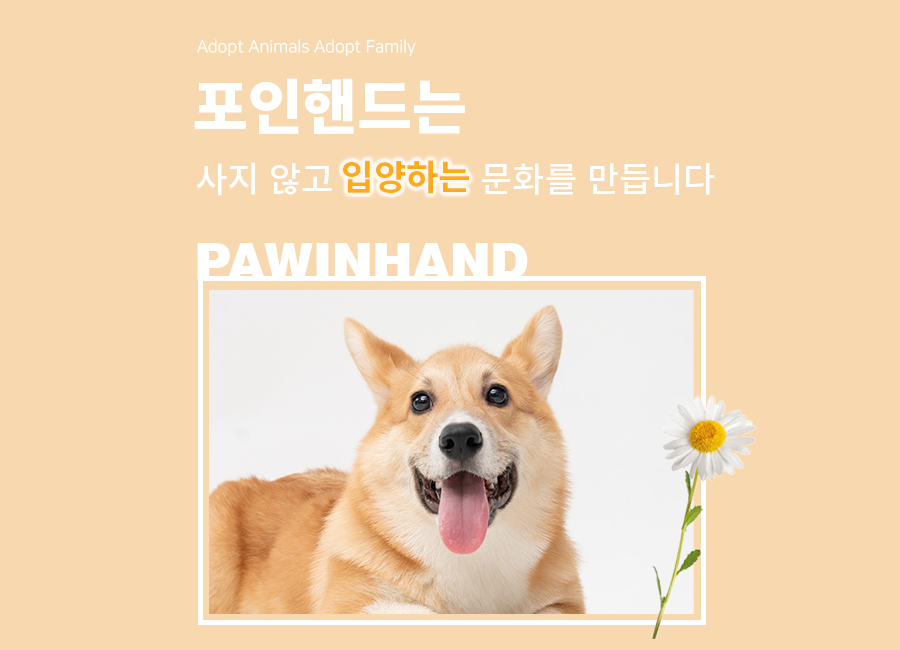
<style>
.page{position:relative;width:900px;height:650px;background:#f8d8af}
.page>*{position:absolute;margin:0}
.t1{font:17.2px "NanumSquareR";letter-spacing:-0.002em;color:#ffffff}
.t2{font:59.7px "NotoSansKR-Black";letter-spacing:-0.002em;color:#ffffff}
.t3{font:35.1px "NotoSansKR-Bold";letter-spacing:-0.002em;color:#ffaa16}
.t4{font:35.1px "NotoSansKR-Medium";letter-spacing:-0.002em;color:#ffffff}
.t5{font:49.9px "Swiss721BT-Black";color:#ffffff}
</style>
<div class="page">
<p class="t1" style="left:197px;top:39px;width:219px;height:18px">Adopt Animals Adopt Family</p>
<p class="t2" style="left:194px;top:78px;width:271px;height:56px">포인핸드는</p>
<p class="t3" style="left:343px;top:160px;width:126px;height:34px">입양하는</p>
<p class="t4" style="left:196px;top:162px;width:136px;height:34px">사지 않고</p>
<p class="t4" style="left:482px;top:163px;width:233px;height:32px">문화를 만듭니다</p>
<p class="t5" style="left:197px;top:243px;width:331px;height:36px">PAWINHAND</p>
</div>
